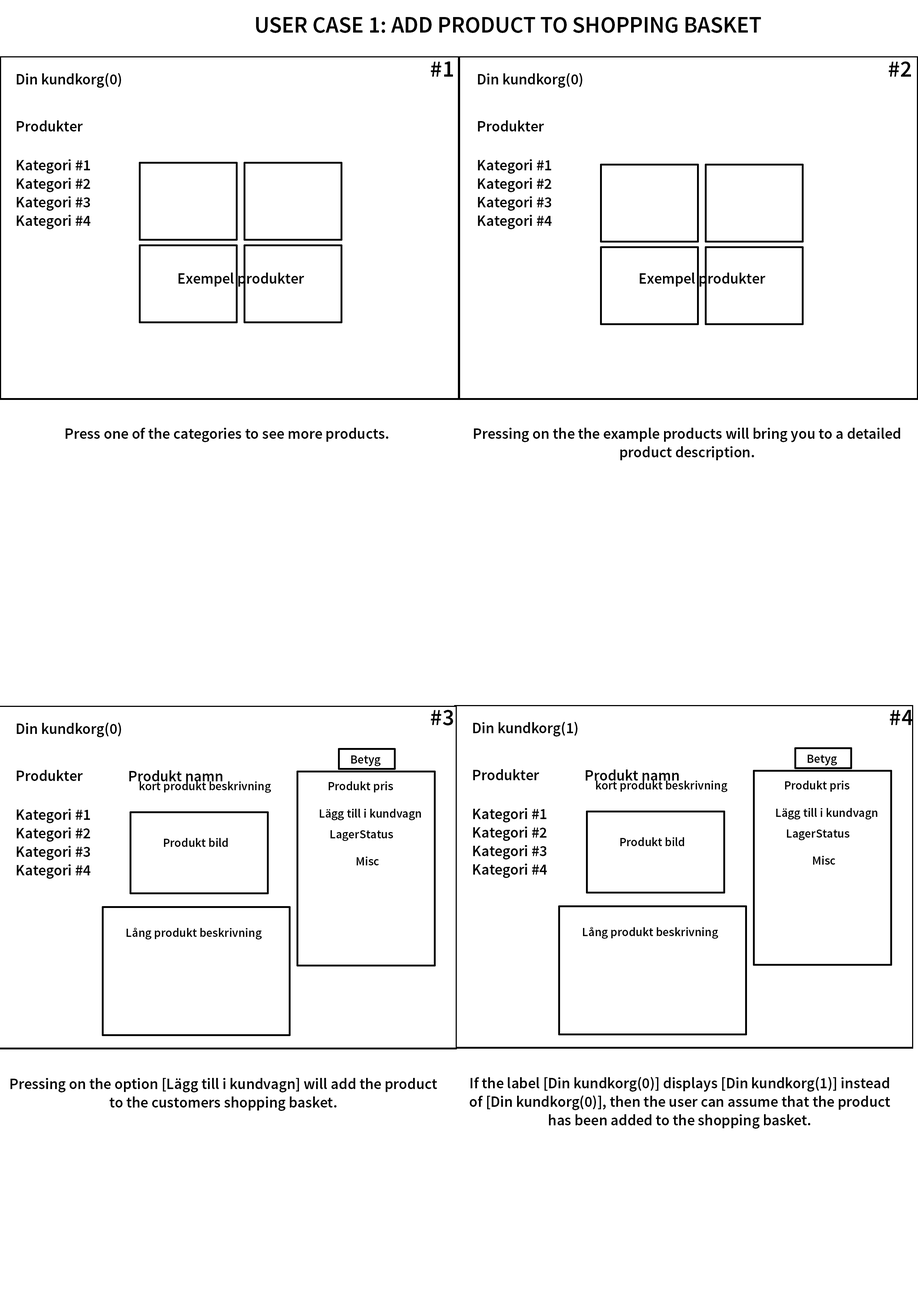
<style>
.page{position:relative;width:918px;height:1299px;background:#ffffff}
.page>*{position:absolute;margin:0}
.t1{font:23.1px "SourceSansPro-Semibold";color:#000000}
.t2{font:15.4px "SourceSansPro-Semibold";color:#000000}
.t3{font:12.3px "SourceSansPro-Semibold";color:#000000}
</style>
<div class="page">
<p class="t1" style="left:256px;top:17px;width:505px;height:16px">USER CASE 1: ADD PRODUCT TO SHOPPING BASKET</p>
<p class="t1" style="left:431px;top:61px;width:22px;height:16px">#1</p>
<p class="t1" style="left:889px;top:61px;width:22px;height:16px">#2</p>
<p class="t2" style="left:17px;top:73px;width:104px;height:15px">Din kundkorg(0)</p>
<p class="t2" style="left:478px;top:73px;width:104px;height:15px">Din kundkorg(0)</p>
<p class="t2" style="left:17px;top:120px;width:66px;height:11px">Produkter</p>
<p class="t2" style="left:478px;top:120px;width:66px;height:11px">Produkter</p>
<p class="t2" style="left:17px;top:159px;width:74px;height:70px;text-align:center">Kategori #1<br>Kategori #2<br>Kategori #3<br>Kategori #4</p>
<p class="t2" style="left:478px;top:159px;width:74px;height:70px;text-align:center">Kategori #1<br>Kategori #2<br>Kategori #3<br>Kategori #4</p>
<p class="t2" style="left:178px;top:272px;width:126px;height:15px">Exempel produkter</p>
<p class="t2" style="left:640px;top:272px;width:126px;height:15px">Exempel produkter</p>
<p class="t2" style="left:66px;top:428px;width:322px;height:14px">Press one of the categories to see more products.</p>
<p class="t2" style="left:474px;top:428px;width:426px;height:32px;text-align:center">Pressing on the the example products will bring you to a detailed product description.</p>
<p class="t1" style="left:431px;top:710px;width:22px;height:15px">#3</p>
<p class="t1" style="left:890px;top:710px;width:23px;height:15px">#4</p>
<p class="t2" style="left:17px;top:722px;width:104px;height:15px">Din kundkorg(0)</p>
<p class="t2" style="left:473px;top:722px;width:105px;height:14px">Din kundkorg(1)</p>
<p class="t3" style="left:351px;top:755px;width:30px;height:11px">Betyg</p>
<p class="t3" style="left:808px;top:755px;width:29px;height:10px">Betyg</p>
<p class="t2" style="left:17px;top:770px;width:66px;height:11px">Produkter</p>
<p class="t2" style="left:129px;top:770px;width:94px;height:11px">Produkt namn</p>
<p class="t2" style="left:473px;top:769px;width:66px;height:11px">Produkter</p>
<p class="t2" style="left:586px;top:769px;width:93px;height:11px">Produkt namn</p>
<p class="t3" style="left:140px;top:781px;width:131px;height:12px">kort produkt beskrivning</p>
<p class="t3" style="left:329px;top:781px;width:64px;height:11px">Produkt pris</p>
<p class="t3" style="left:596px;top:780px;width:131px;height:12px">kort produkt beskrivning</p>
<p class="t3" style="left:785px;top:780px;width:65px;height:12px">Produkt pris</p>
<p class="t2" style="left:17px;top:809px;width:74px;height:70px;text-align:center">Kategori #1<br>Kategori #2<br>Kategori #3<br>Kategori #4</p>
<p class="t3" style="left:320px;top:809px;width:101px;height:11px">Lägg till i kundvagn</p>
<p class="t2" style="left:473px;top:808px;width:74px;height:70px;text-align:center">Kategori #1<br>Kategori #2<br>Kategori #3<br>Kategori #4</p>
<p class="t3" style="left:776px;top:808px;width:101px;height:11px">Lägg till i kundvagn</p>
<p class="t3" style="left:331px;top:830px;width:62px;height:11px">LagerStatus</p>
<p class="t3" style="left:787px;top:829px;width:63px;height:11px">LagerStatus</p>
<p class="t3" style="left:164px;top:838px;width:64px;height:9px">Produkt bild</p>
<p class="t3" style="left:620px;top:837px;width:64px;height:9px">Produkt bild</p>
<p class="t3" style="left:357px;top:856px;width:22px;height:9px">Misc</p>
<p class="t3" style="left:813px;top:856px;width:23px;height:8px">Misc</p>
<p class="t3" style="left:127px;top:927px;width:135px;height:12px">Lång produkt beskrivning</p>
<p class="t3" style="left:583px;top:927px;width:135px;height:12px">Lång produkt beskrivning</p>
<p class="t2" style="left:10px;top:1078px;width:427px;height:33px;text-align:center">Pressing on the option [Lägg till i kundvagn] will add the product to the customers shopping basket.</p>
<p class="t2" style="left:470px;top:1077px;width:420px;height:51px;text-align:center">If the label [Din kundkorg(0)] displays [Din kundkorg(1)] instead of [Din kundkorg(0)], then the user can assume that the product has been added to the shopping basket.</p>
</div>
